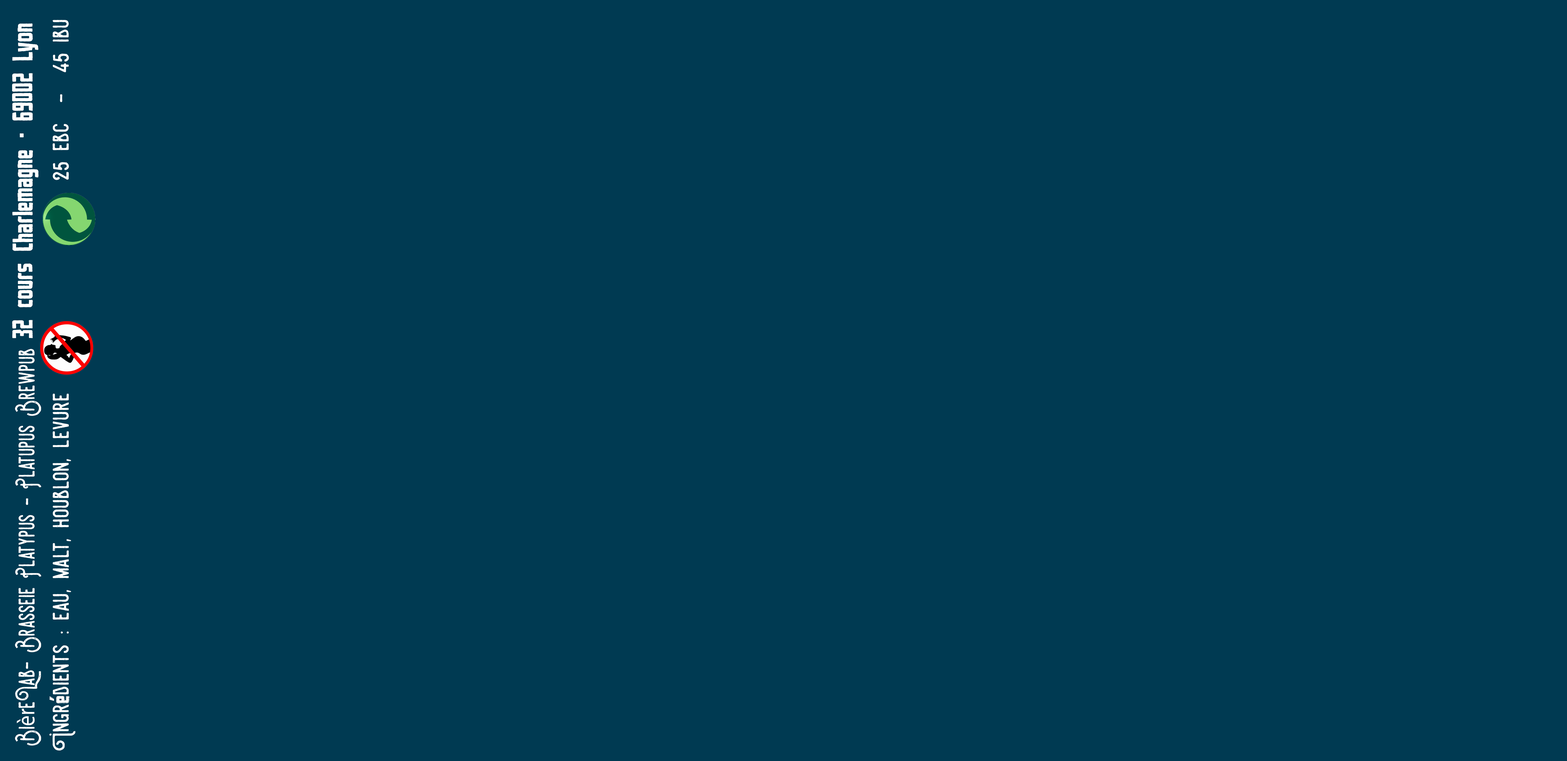
<style>
.page{position:relative;width:1567px;height:761px;background:#003a52}
.page>*{position:absolute;margin:0}
.t1{font:28.4px "UrbanBrush";color:#ffffff}
.t2{font:25.3px "SteelworksVintageDemo";color:#ffffff}
.t3{font:25.3px "SteelworksVintageDemo";color:#ffffff;scale:0.84 1}
.t4{font:25.3px "MyriadPro-Regular";color:#ffffff;scale:0.84 1}
.t5{font:25.3px "UrbanBrush";color:#ffffff}
</style>
<div class="page">
<p class="t1" style="left:12px;top:23px;width:27px;height:315px;rotate:-90deg">32 cours Charlemagne - 69002 Lyon</p>
<p class="t2" style="left:52px;top:20px;width:17px;height:160px;rotate:-90deg">25 ebc  -  45 ibu</p>
<p class="t3" style="left:15px;top:349px;width:26px;height:397px;rotate:-90deg">Bi<span class="t4">èr</span>eLab- Brasseie Platypus - Platupus Brewpub</p>
<p class="t2" style="left:49px;top:394px;width:26px;height:357px;rotate:-90deg">Ingr<span class="t5">é</span>dients : eau, malt, houblon, levure</p>
</div>
